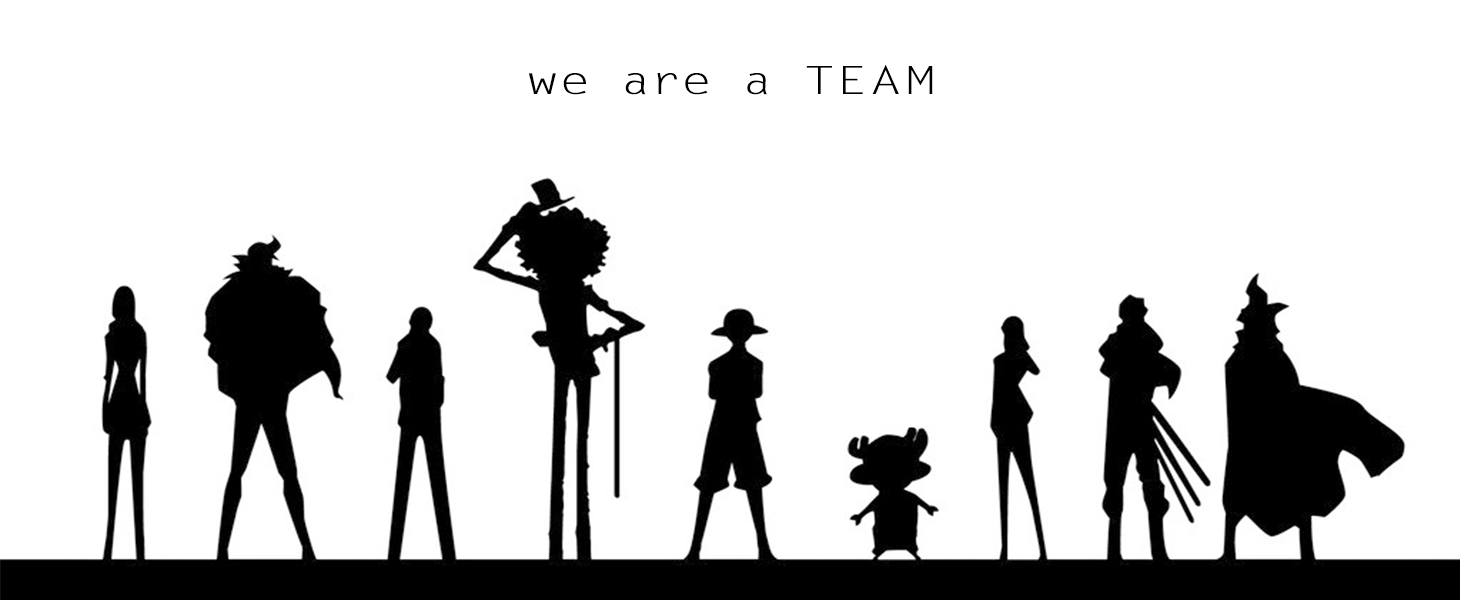
<style>
.page{position:relative;width:1460px;height:600px;background:#ffffff}
.page>*{position:absolute;margin:0}
.t1{font:38.9px "FZYXJW--GB1-0";letter-spacing:0.1em;color:#000000;scale:1.39 1}
</style>
<div class="page">
<p class="t1" style="left:529px;top:64px;width:404px;height:31px">we are a TEAM</p>
</div>
